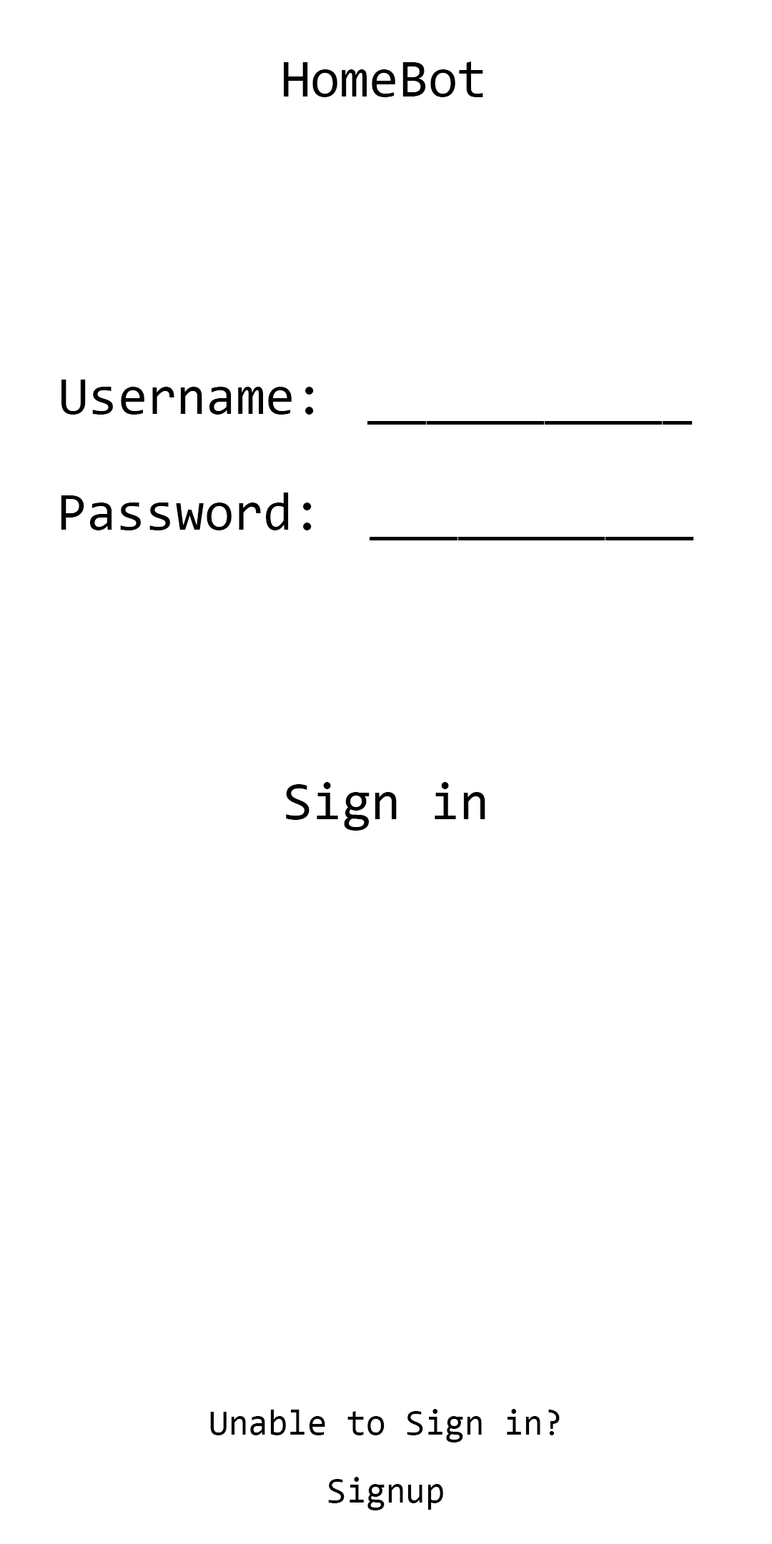
<style>
.page{position:relative;width:772px;height:1544px;background:#ffffff}
.page>*{position:absolute;margin:0}
.t1{font:53.6px "Consolas";color:#000000}
.t2{font:53.6px/115.7px "Consolas";color:#000000}
.t3{font:35.7px/68px "Consolas";color:#000000}
</style>
<div class="page">
<p class="t1" style="left:284px;top:61px;width:199px;height:36px">HomeBot</p>
<p class="t2" style="left:61px;top:380px;width:633px;height:161px;text-align:center">Username:  ___________<br>Password:  ___________</p>
<p class="t1" style="left:286px;top:782px;width:199px;height:49px">Sign in</p>
<p class="t3" style="left:210px;top:1409px;width:350px;height:102px;text-align:center">Unable to Sign in?<br>Signup</p>
</div>
